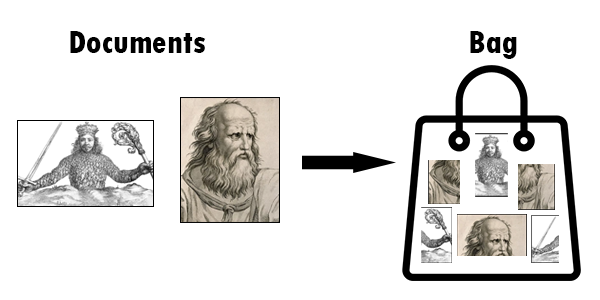
<style>
.page{position:relative;width:600px;height:300px;background:#ffffff}
.page>*{position:absolute;margin:0}
.t1{font:34px "TwCenMT-CondensedExtraBold";color:#000000}
</style>
<div class="page">
<p class="t1" style="left:70px;top:31px;width:136px;height:22px">Documents</p>
<p class="t1" style="left:470px;top:31px;width:47px;height:28px">Bag</p>
</div>
